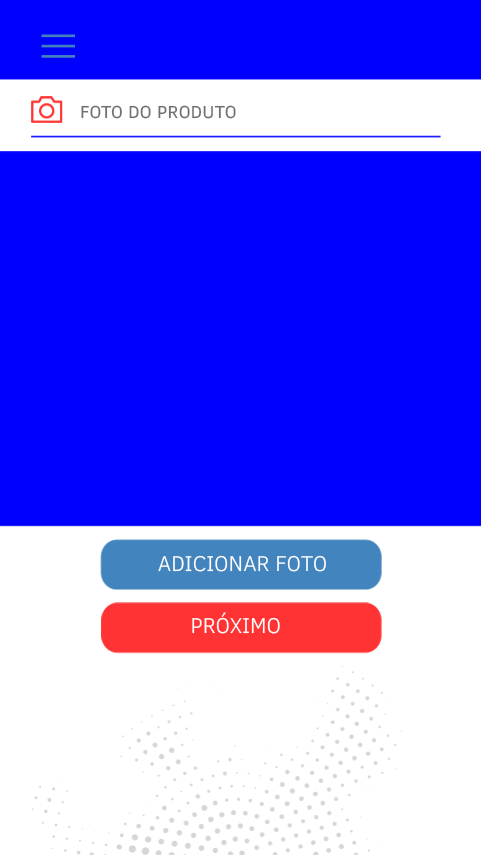
<style>
.page{position:relative;width:481px;height:855px;background:#0000ff}
.page>*{position:absolute;margin:0}
.t1{font:17.7px "ClearSans";letter-spacing:0.02em;color:#707072}
.t2{font:21.8px "ClearSans-Light";color:#ffffff}
</style>
<div class="page">
<p class="t1" style="left:81px;top:105px;width:155px;height:14px">FOTO DO PRODUTO</p>
<p class="t2" style="left:158px;top:555px;width:168px;height:17px">ADICIONAR FOTO</p>
<p class="t2" style="left:192px;top:612px;width:88px;height:22px">PRÓXIMO</p>
</div>
